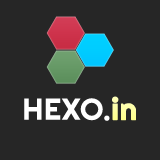
<style>
.page{position:relative;width:160px;height:160px;background:#262626}
.page>*{position:absolute;margin:0}
.t1{font:30px "Righteous-Regular";letter-spacing:0.02em;color:#ffffff}
.t2{font:30px "Righteous-Regular";letter-spacing:0.02em;color:#feffa6;font-weight:bold}
</style>
<div class="page">
<p class="t1" style="left:24px;top:98px;width:86px;height:23px">HEXO.</p>
<p class="t2" style="left:112px;top:96px;width:24px;height:25px">in</p>
</div>
